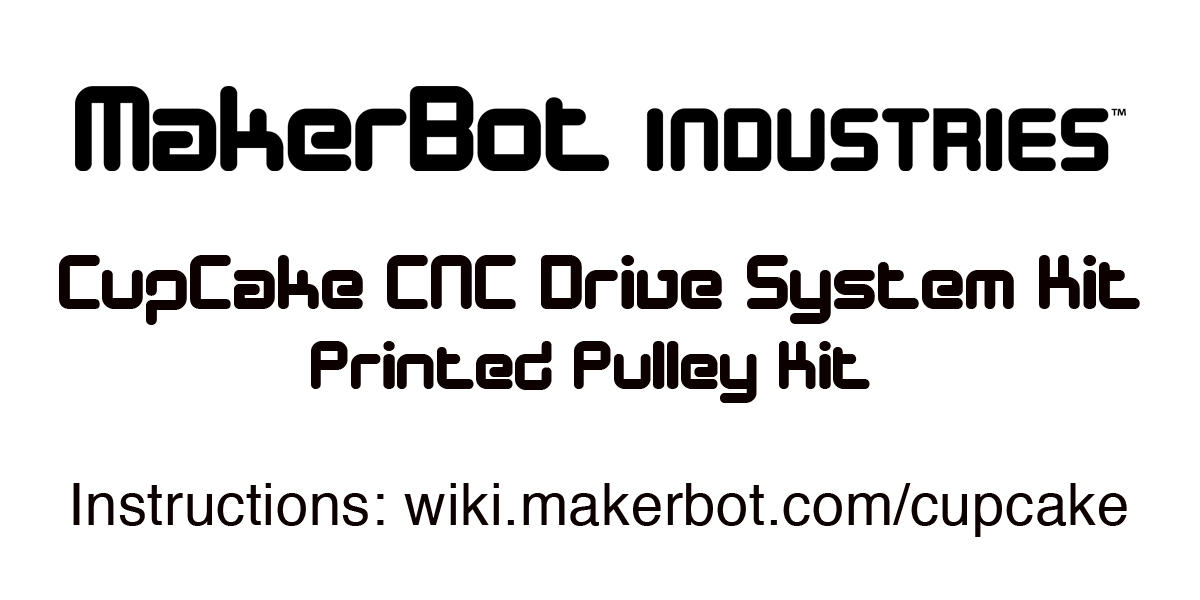
<style>
.page{position:relative;width:1200px;height:600px;background:#ffffff}
.page>*{position:absolute;margin:0}
.t1{font:79.1px "DesignerBlock";letter-spacing:0.01em;color:#0c0000}
.t2{font:70.9px "DesignerBlock";letter-spacing:0.01em;color:#0c0000}
.t3{font:57.9px "Helvetica";letter-spacing:0.01em;color:#0c0000}
</style>
<div class="page">
<p class="t1" style="left:59px;top:255px;width:1081px;height:70px">CupCake CNC Drive System Kit</p>
<p class="t2" style="left:311px;top:341px;width:559px;height:62px">Printed Pulley Kit</p>
<p class="t3" style="left:73px;top:483px;width:1054px;height:54px">Instructions: wiki.makerbot.com/cupcake</p>
</div>
